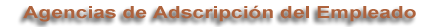
<style>
.page{position:relative;width:446px;height:27px;background:#ffffff}
.page>*{position:absolute;margin:0}
.t1{font:16.8px "Arial-BoldMT";color:#ae633d;scale:1.25 1}
</style>
<div class="page">
<p class="t1" style="left:23px;top:5px;width:393px;height:17px">Agencias de Adscripción del Empleado</p>
</div>
